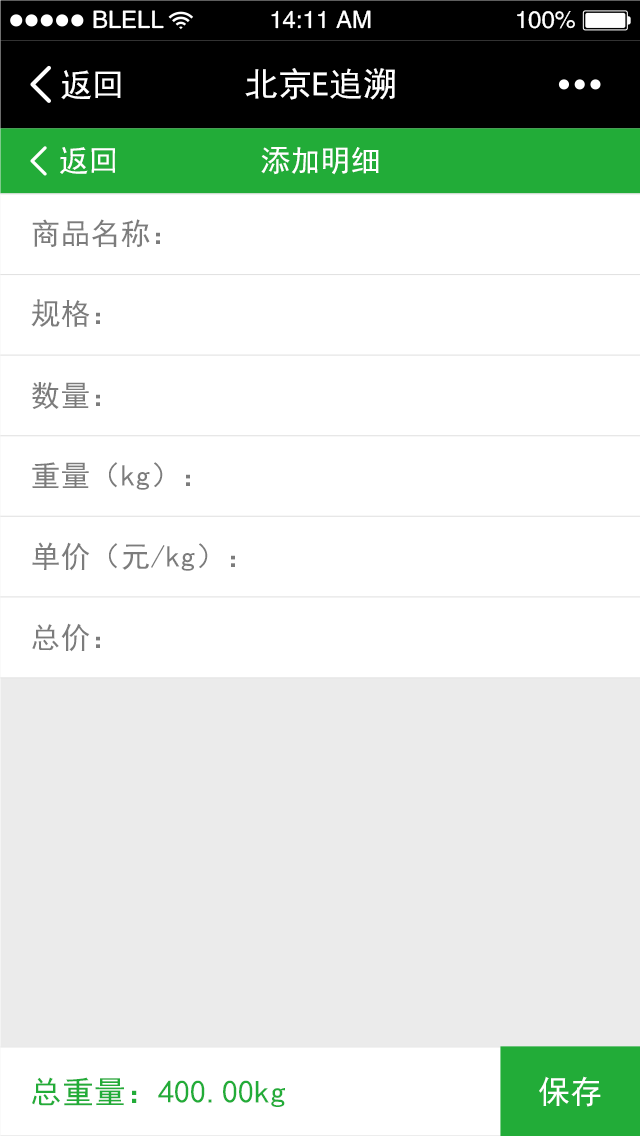
<style>
.page{position:relative;width:640px;height:1136px;background:#ffffff}
.page>*{position:absolute;margin:0}
.t1{font:24px "FZHTJW--GB1-0";color:#ffffff}
.t2{font:32px "SimHei";color:#ffffff}
.t3{font:34px "SimHei";color:#ffffff}
.t4{font:30px "SimHei";color:#ffffff}
.t5{font:30px "SimHei";color:#7c7c7c}
.t6{font:32px "SimHei";color:#22ac38}
</style>
<div class="page">
<p class="t1" style="left:93px;top:10px;width:71px;height:19px">BLELL</p>
<p class="t1" style="left:271px;top:10px;width:100px;height:19px">14:11 AM</p>
<p class="t1" style="left:517px;top:10px;width:58px;height:19px">100%</p>
<p class="t2" style="left:61px;top:70px;width:60px;height:30px">返回</p>
<p class="t3" style="left:245px;top:68px;width:150px;height:32px">北京E追溯</p>
<p class="t4" style="left:60px;top:147px;width:55px;height:27px">返回</p>
<p class="t4" style="left:261px;top:147px;width:118px;height:28px">添加明细</p>
<p class="t5" style="left:32px;top:219px;width:128px;height:29px">商品名称：</p>
<p class="t5" style="left:31px;top:299px;width:69px;height:28px">规格：</p>
<p class="t5" style="left:32px;top:382px;width:68px;height:27px">数量：</p>
<p class="t5" style="left:32px;top:462px;width:158px;height:28px">重量（kg）：</p>
<p class="t5" style="left:32px;top:542px;width:203px;height:29px">单价（元/kg）：</p>
<p class="t5" style="left:32px;top:623px;width:68px;height:29px">总价：</p>
<p class="t6" style="left:32px;top:1077px;width:253px;height:30px">总重量：400.00kg</p>
<p class="t2" style="left:539px;top:1076px;width:62px;height:31px">保存</p>
</div>
